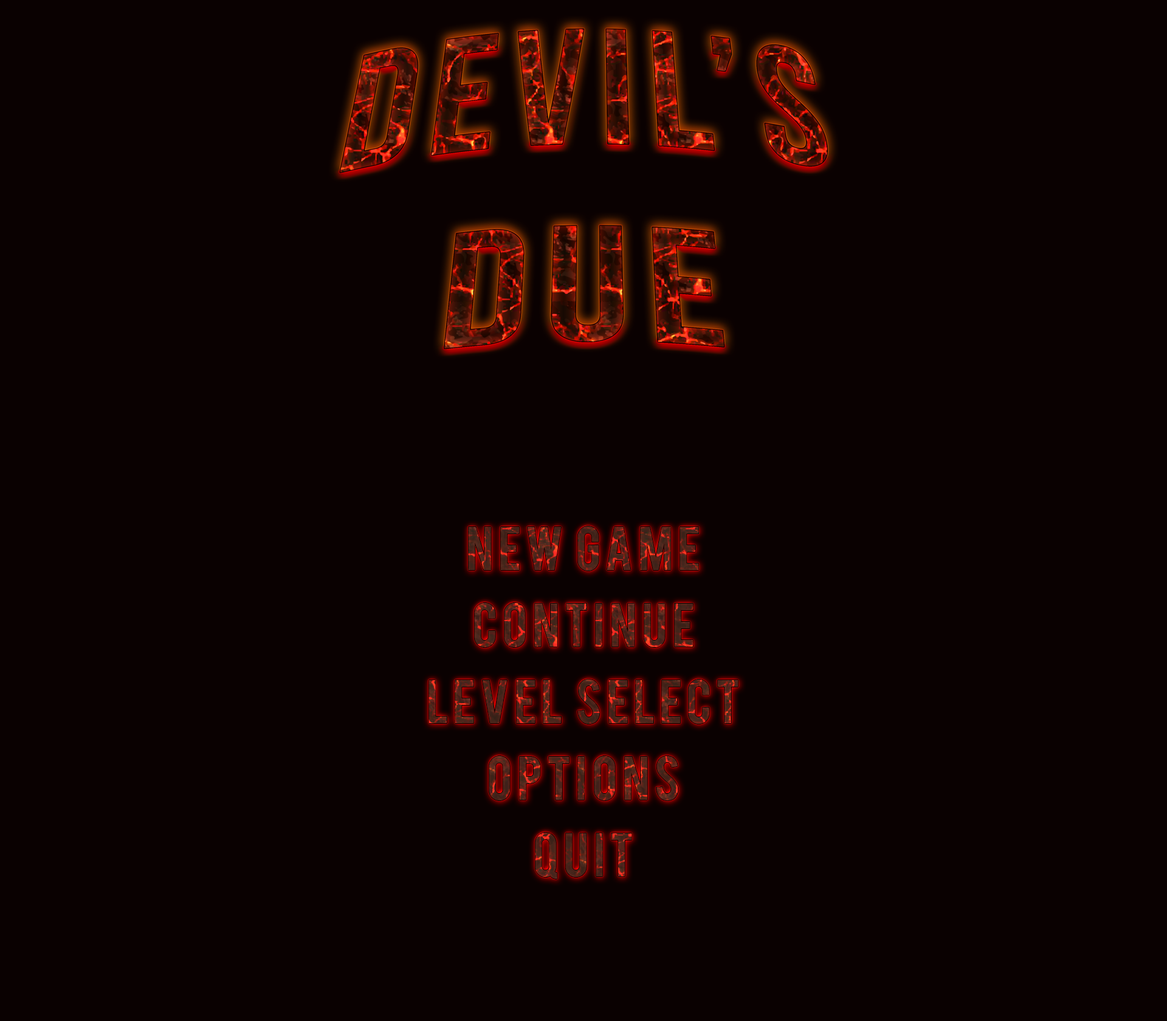
<style>
.page{position:relative;width:1167px;height:1021px;background:#0a0101}
.page>*{position:absolute;margin:0}
.t1{font:48.6px "Bebas";letter-spacing:0.08em;text-transform:uppercase}
</style>
<div class="page">
<p class="t1" style="left:429px;top:527px;width:310px;height:352px;text-align:center">NEW GAME<br>CONTINUE<br>LEVEL SELECT<br>OPTIONS<br>QUIT</p>
</div>
